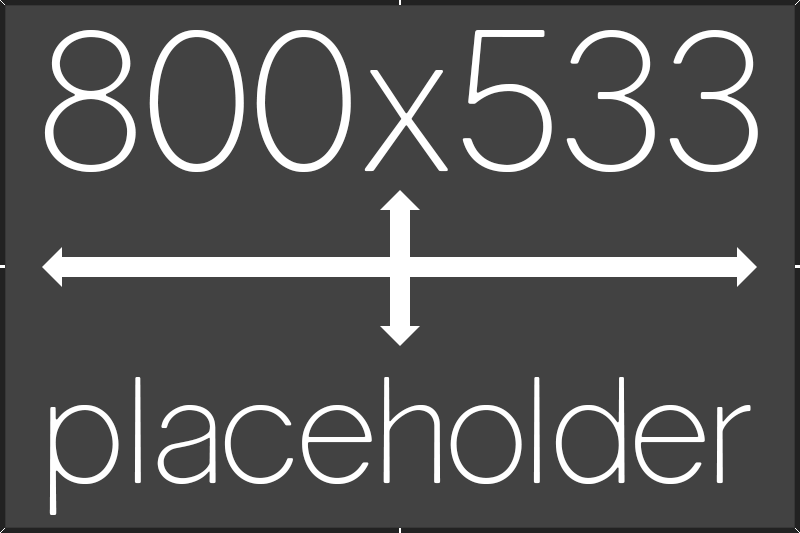
<style>
.page{position:relative;width:800px;height:533px;background:#424242}
.page>*{position:absolute;margin:0}
.t1{font:200px "Gravity-Light";color:#ffffff}
.t2{font:150px "Gravity-Light";color:#ffffff}
</style>
<div class="page">
<p class="t1" style="left:44px;top:30px;width:714px;height:142px">800x533</p>
<p class="t2" style="left:49px;top:377px;width:702px;height:138px">placeholder</p>
</div>
